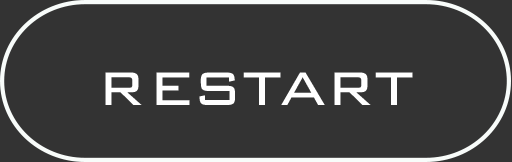
<style>
.page{position:relative;width:512px;height:162px;background:#333333}
.page>*{position:absolute;margin:0}
.t1{font:76.6px "BankGothic";color:#fefefe}
</style>
<div class="page">
<p class="t1" style="left:105px;top:72px;width:308px;height:33px">restart</p>
</div>
